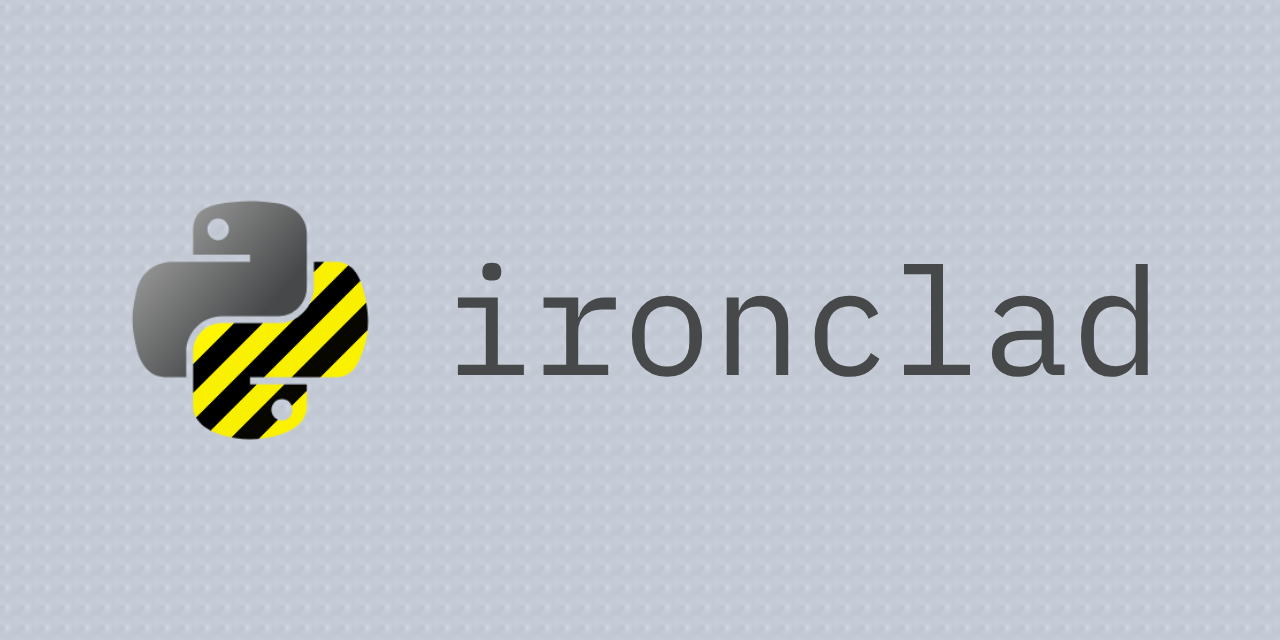
<style>
.page{position:relative;width:1280px;height:640px;background:#c2c9d3}
.page>*{position:absolute;margin:0}
.t1{font:150px "IBMPlexMono-Regular";color:#474849}
</style>
<div class="page">
<p class="t1" style="left:457px;top:262px;width:691px;height:115px">ironclad</p>
</div>
